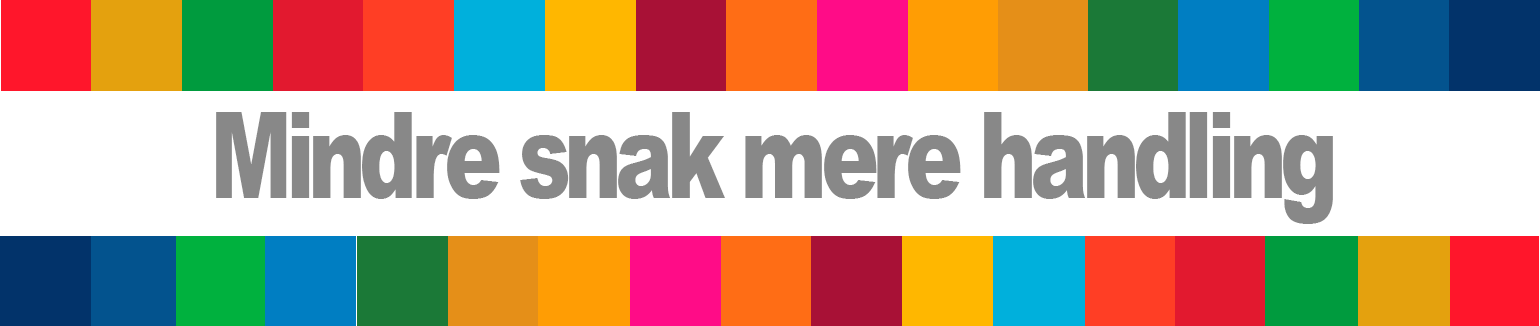
<style>
.page{position:relative;width:1540px;height:326px;background:#ffffff}
.page>*{position:absolute;margin:0}
.t1{font:120px "Arial-Black";letter-spacing:-0.075em;color:#888888;scale:0.72 1}
</style>
<div class="page">
<p class="t1" style="left:216px;top:112px;width:1117px;height:112px">Mindre snak mere handling</p>
</div>
